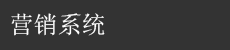
<style>
.page{position:relative;width:230px;height:50px;background:#333333}
.page>*{position:absolute;margin:0}
.t1{font:24px "SimSun";color:#ffffff}
</style>
<div class="page">
<p class="t1" style="left:11px;top:13px;width:94px;height:23px">营销系统</p>
</div>
